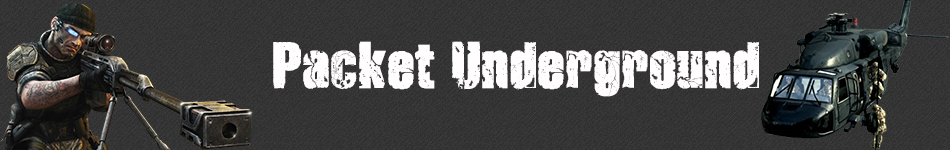
<style>
.page{position:relative;width:950px;height:150px}
.page>*{position:absolute;margin:0}
.t1{font:65px "Disintegration";color:#fffdfd}
</style>
<div class="page">
<p class="t1" style="left:273px;top:41px;width:486px;height:56px">Packet Underground</p>
</div>
